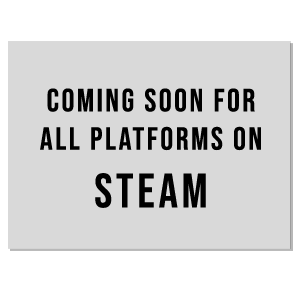
<style>
.page{position:relative;width:300px;height:300px;background:#d9d9d9}
.page>*{position:absolute;margin:0}
.t1{font:32px "BebasNeue-Regular";letter-spacing:0.08em;color:#000000}
.t2{font:48px "BebasNeue-Regular";letter-spacing:0.08em;color:#000000}
</style>
<div class="page">
<p class="t1" style="left:40px;top:88px;width:221px;height:120px;text-align:center">cOMING SOON For<br>all platforms on<br><span class="t2">STEAM</span></p>
</div>
